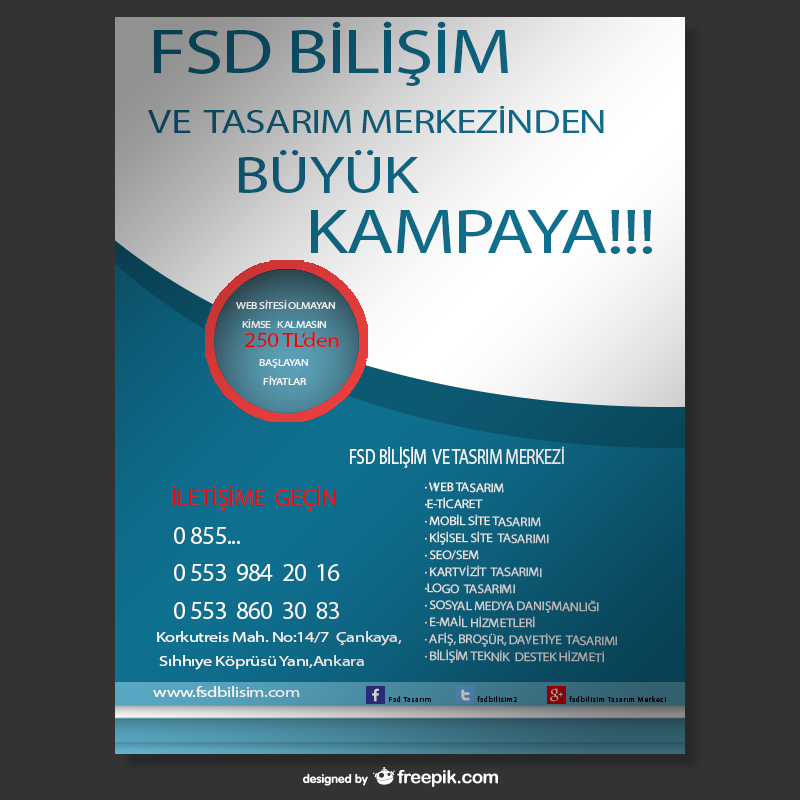
<style>
.page{position:relative;width:800px;height:800px;background:#333333}
.page>*{position:absolute;margin:0}
.t1{font:33.4px/60.2px "MyriadPro-Regular";letter-spacing:-0.025em;color:#0d5f7b;scale:1.25 1}
.t2{font:62.5px/60.2px "MyriadPro-Regular";letter-spacing:-0.025em;color:#0d5f7b;scale:1.25 1}
.t3{font:52.1px/60.2px "MyriadPro-Regular";letter-spacing:-0.025em;color:#0d5f7b;scale:1.25 1}
.t4{font:10.4px/19px "MyriadPro-Regular";letter-spacing:-0.025em;color:#ffffff;scale:1.12 1}
.t5{font:20.8px/19px "MyriadPro-Regular";letter-spacing:-0.025em;color:#f30a0a;scale:1.12 1}
.t6{font:21.1px "MyriadPro-Regular";letter-spacing:-0.025em;color:#ffffff;scale:0.8 1}
.t7{font:25px/18.8px "MyriadPro-Regular";letter-spacing:-0.025em;color:#ffffff}
.t8{font:25px/18.8px "MyriadPro-Regular";letter-spacing:-0.025em;color:#f30a0a}
.t9{font:12.5px/16.9px "MyriadPro-Regular";letter-spacing:-0.025em;scale:1.1 1}
.t10{font:14.6px "MyriadPro-Regular";letter-spacing:-0.025em;color:#ffffff;scale:1.26 1}
.t11{font:7.2px "MyriadPro-Regular";letter-spacing:0.1em;color:#000000}
</style>
<div class="page">
<p class="t1" style="left:148px;top:21px;width:504px;height:233px"><span class="t2">FSD BİLİŞİM <br></span>VE  TASARIM MERKEZİNDEN <br>           <span class="t3">BÜYÜK  <br>                    </span><span class="t2">KAMPAYA!!!</span></p>
<p class="t4" style="left:236px;top:300px;width:103px;height:85px">WEB SİTESİ OLMAYAN<br>   KİMSE   KALMASIN              <br><span class="t5">  250 TL’den<br></span>           BAŞLAYAN <br>             FİYATLAR</p>
<p class="t6" style="left:350px;top:446px;width:214px;height:22px">FSD BİLİŞİM  VE TASRIM MERKEZİ</p>
<p class="t7" style="left:172px;top:485px;width:168px;height:134px"><span class="t8">İLETİŞİME  GEÇİN<br><br></span>0 855...<br><br>0 553  984  20  16<br><br>0 553  860  30  83</p>
<p class="t9" style="left:425px;top:482px;width:192px;height:181px;rotate:1deg">· WEB TASARIM<br>·E-TİCARET<br>· MOBİL SİTE TASARIM<br>· KİŞİSEL SİTE  TASARIMI<br>· SEO/SEM<br>· KARTVİZİT  TASARIMI<br>·LOGO  TASARIMI<br>· SOSYAL MEDYA DANIŞMANLIĞI<br>· E-MAİL HİZMETLERİ<br>· AFİŞ, BROŞÜR, DAVETİYE  TASARIMI<br>· BİLİŞİM TEKNİK  DESTEK HİZMETİ</p>
<p class="t10" style="left:157px;top:631px;width:245px;height:15px">Korkutreis Mah. No:14/7  Çankaya,</p>
<p class="t10" style="left:159px;top:655px;width:205px;height:15px">Sıhhıye Köprüsü Yanı,Ankara</p>
<p class="t10" style="left:153px;top:686px;width:147px;height:11px">www.fsdbilisim.com</p>
<p class="t11" style="left:389px;top:696px;width:42px;height:6px">Fsd Tasarım</p>
<p class="t11" style="left:477px;top:696px;width:40px;height:6px">fsdbilisim2</p>
<p class="t11" style="left:569px;top:696px;width:97px;height:7px">fsdbilisim Tasarım Merkezi</p>
</div>
